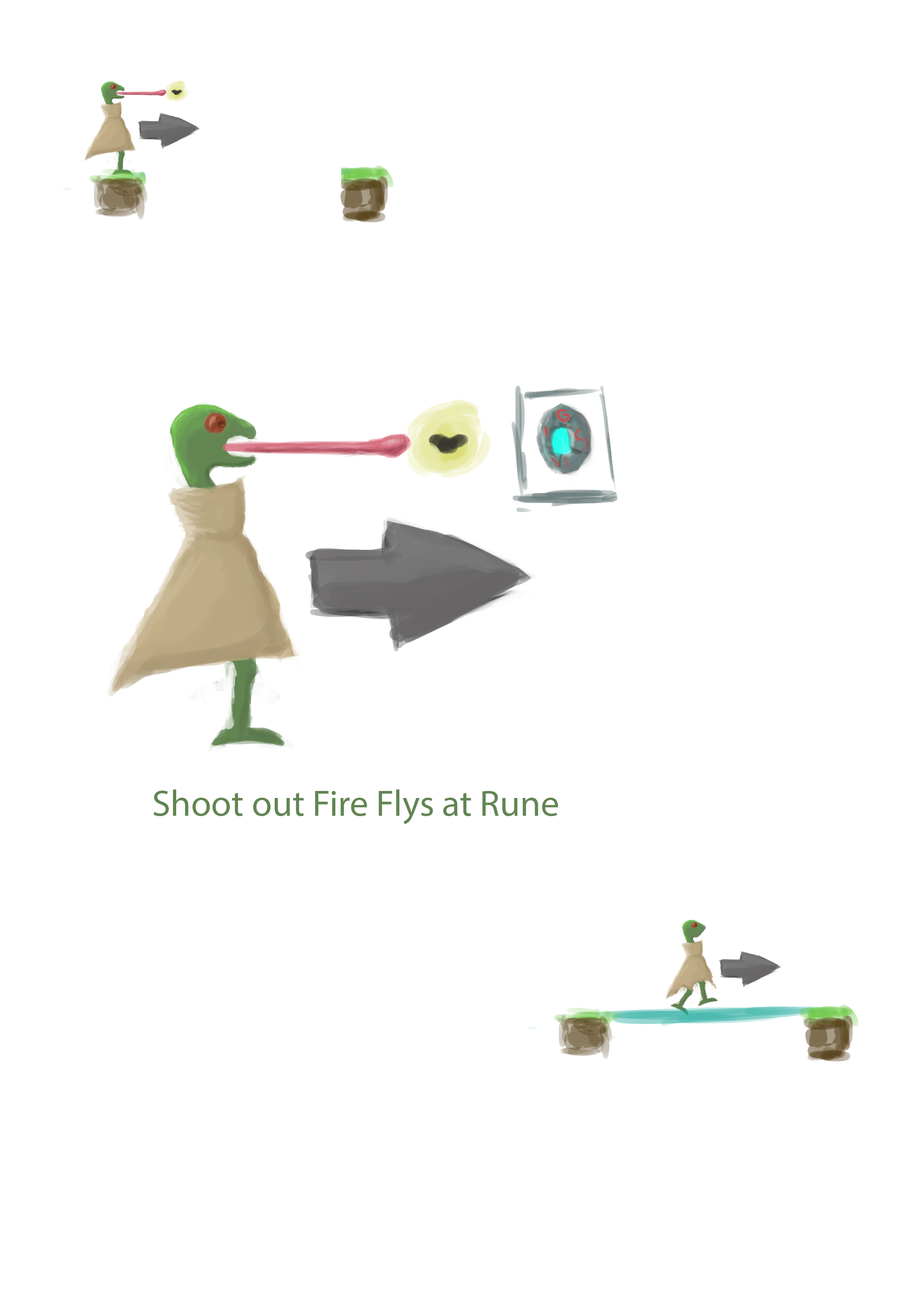
<style>
.page{position:relative;width:918px;height:1299px;background:#ffffff}
.page>*{position:absolute;margin:0}
.t1{font:37px "MyriadPro-Regular";color:#628552}
</style>
<div class="page">
<p class="t1" style="left:153px;top:789px;width:405px;height:35px">Shoot out Fire Flys at Rune</p>
</div>
